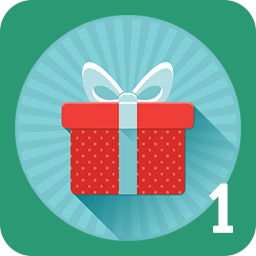
<style>
.page{position:relative;width:256px;height:256px;background:#2b9974}
.page>*{position:absolute;margin:0}
.t1{font:56.9px "FjallaOne-Regular";letter-spacing:-0.03em;color:#ffffff;text-transform:uppercase;font-weight:bold}
</style>
<div class="page">
<p class="t1" style="left:209px;top:183px;width:24px;height:50px">1</p>
</div>
